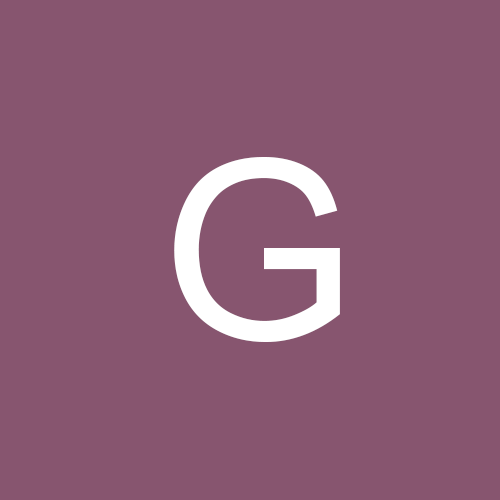
<style>
.page{position:relative;width:500px;height:500px;background:#87556f}
.page>*{position:absolute;margin:0}
.t1{font:250px "ArialMT";color:#ffffff}
</style>
<div class="page">
<p class="t1" style="left:174px;top:157px;width:166px;height:185px">G</p>
</div>
